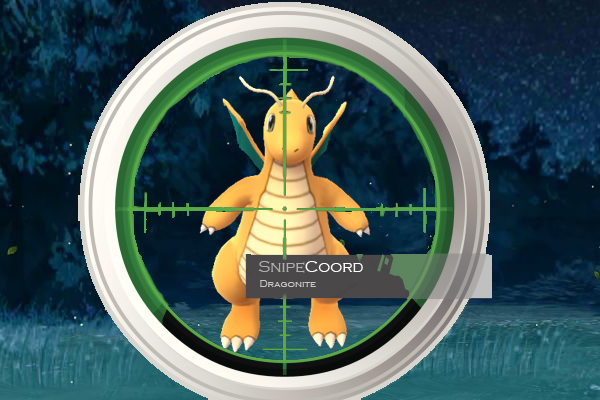
<style>
.page{position:relative;width:600px;height:400px}
.page>*{position:absolute;margin:0}
.t1{font:16px "CopperplateGothic-Light";color:#afafaf}
.t2{font:16px "CopperplateGothic-Light";color:#ffffff}
.t3{font:10px "CopperplateGothic-Light";color:#c8c8c8}
</style>
<div class="page">
<p class="t1" style="left:258px;top:261px;width:105px;height:12px">Snipe<span class="t2">Coord</span></p>
<p class="t3" style="left:260px;top:280px;width:56px;height:7px">Dragonite</p>
</div>
